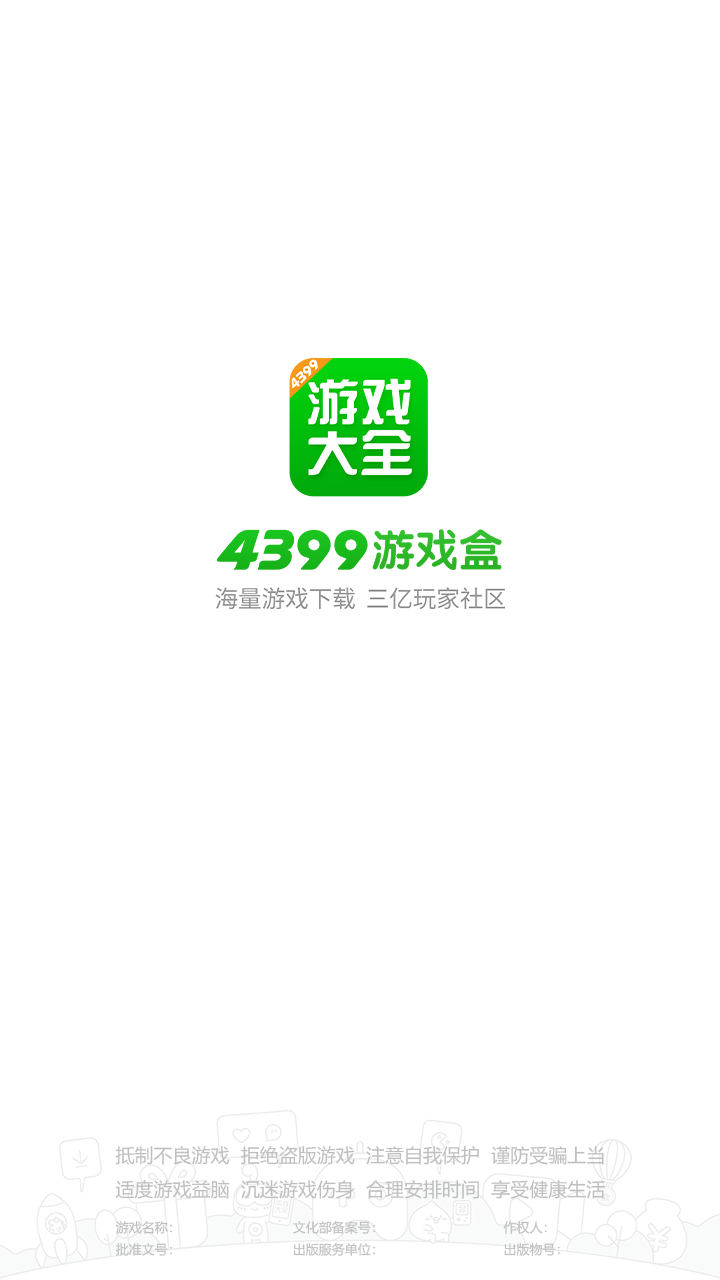
<style>
.page{position:relative;width:720px;height:1280px;background:#ffffff}
.page>*{position:absolute;margin:0}
.t1{font:19px/33.1px "MicrosoftYaHei";color:#bfbfbf}
.t2{font:13px "MicrosoftYaHei";color:#bfbfbf}
</style>
<div class="page">
<p class="t1" style="left:115px;top:1146px;width:491px;height:53px">抵制不良游戏  拒绝盗版游戏  注意自我保护  谨防受骗上当 <br>适度游戏益脑  沉迷游戏伤身  合理安排时间  享受健康生活</p>
<p class="t2" style="left:115px;top:1221px;width:445px;height:35px">游戏名称：                              文化部备案号：                                作权人：    <br>批准文号：                              出版服务单位：                                出版物号：</p>
</div>
